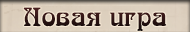
<style>
.page{position:relative;width:190px;height:32px}
.page>*{position:absolute;margin:0}
.t1{font:25.6px "ArnoldBocklinC";color:#2a1212}
</style>
<div class="page">
<p class="t1" style="left:23px;top:7px;width:144px;height:24px">Новая игра</p>
</div>
